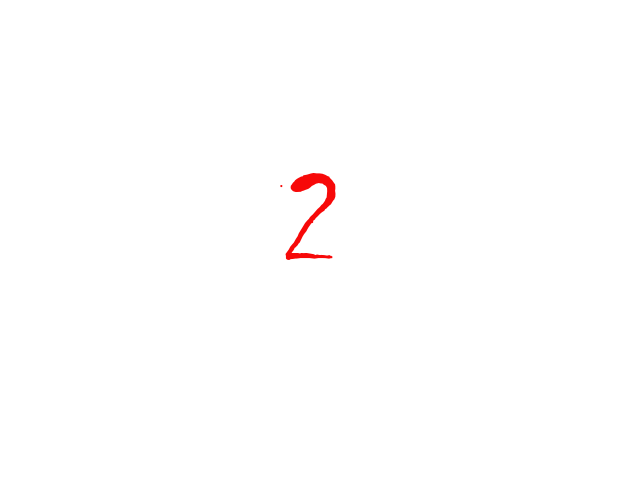
<style>
.page{position:relative;width:630px;height:500px;background:#ffffff}
.page>*{position:absolute;margin:0}
.t1{font:138.9px "Chiller-Regular";color:#f80909}
</style>
<div class="page">
<p class="t1" style="left:280px;top:173px;width:56px;height:87px">2</p>
</div>
